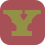
<style>
.page{position:relative;width:45px;height:45px;background:#a75157}
.page>*{position:absolute;margin:0}
.t1{font:50px "Saddlebag-Black";color:#949146}
</style>
<div class="page">
<p class="t1" style="left:3px;top:10px;width:38px;height:26px">Y</p>
</div>
